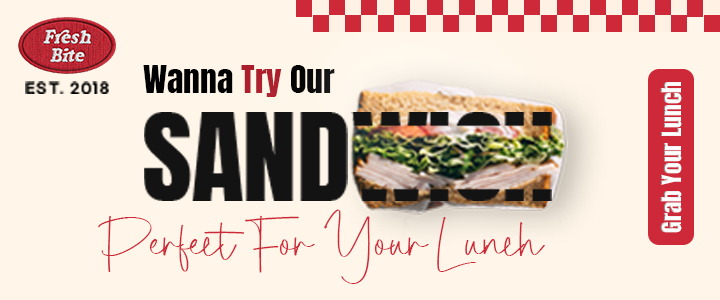
<style>
.page{position:relative;width:720px;height:300px;background:#fff6e9}
.page>*{position:absolute;margin:0}
.t1{font:32.2px "Anton-Regular";color:#000000;scale:1.05 1}
.t2{font:32.2px "Anton-Regular";color:#ab1c2a;scale:1.05 1}
.t3{font:13.2px "GmarketSansMedium";letter-spacing:0.15em;color:#000000}
.t4{font:23.4px "Anton-Regular";color:#ffffff}
.t5{font:68.1px "SabrinaDestiny";letter-spacing:-0.05em;color:#ce2939;scale:1.05 1}
</style>
<div class="page">
<p class="t1" style="left:143px;top:65px;width:192px;height:32px">Wanna <span class="t2">Try </span>Our</p>
<p class="t3" style="left:25px;top:81px;width:84px;height:13px">EST. 2018</p>
<p class="t4" style="left:660px;top:82px;width:22px;height:151px;rotate:-90deg">Grab Your Lunch</p>
<p class="t5" style="left:98px;top:209px;width:447px;height:75px">Perfect For Your Lunch</p>
</div>
